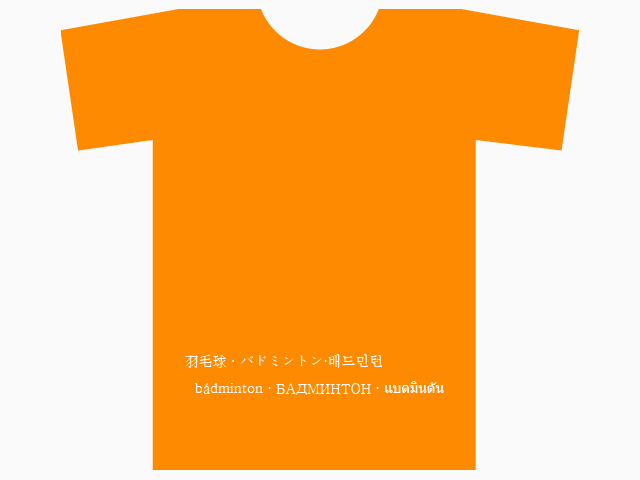
<style>
.page{position:relative;width:640px;height:480px;background:#fe8a01}
.page>*{position:absolute;margin:0}
.t1{font:14px "Batang";color:#ffffff}
.t2{font:14px "Tahoma";color:#ffffff}
</style>
<div class="page">
<p class="t1" style="left:185px;top:354px;width:197px;height:14px">羽毛球 ∙ バドミントン∙배드민턴</p>
<p class="t1" style="left:195px;top:381px;width:249px;height:14px">bádminton ∙ БАДМИНТОН ∙ <span class="t2">แบดมินตัน</span></p>
</div>
